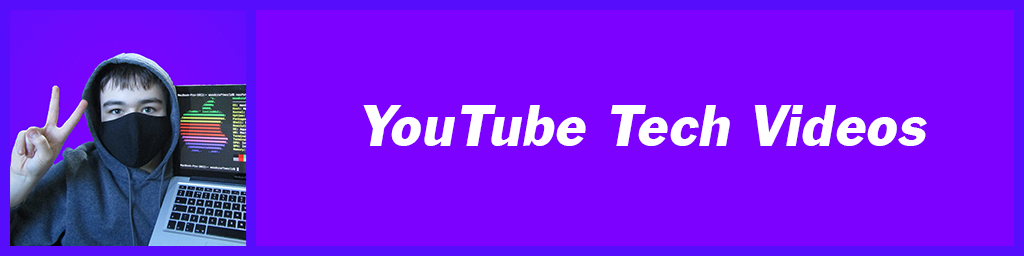
<style>
.page{position:relative;width:1024px;height:256px;background:#7d01ff}
.page>*{position:absolute;margin:0}
.t1{font:61.1px "FranklinGothicITALIC";color:#ffffff}
</style>
<div class="page">
<p class="t1" style="left:363px;top:105px;width:564px;height:41px">YouTube Tech Videos</p>
</div>
